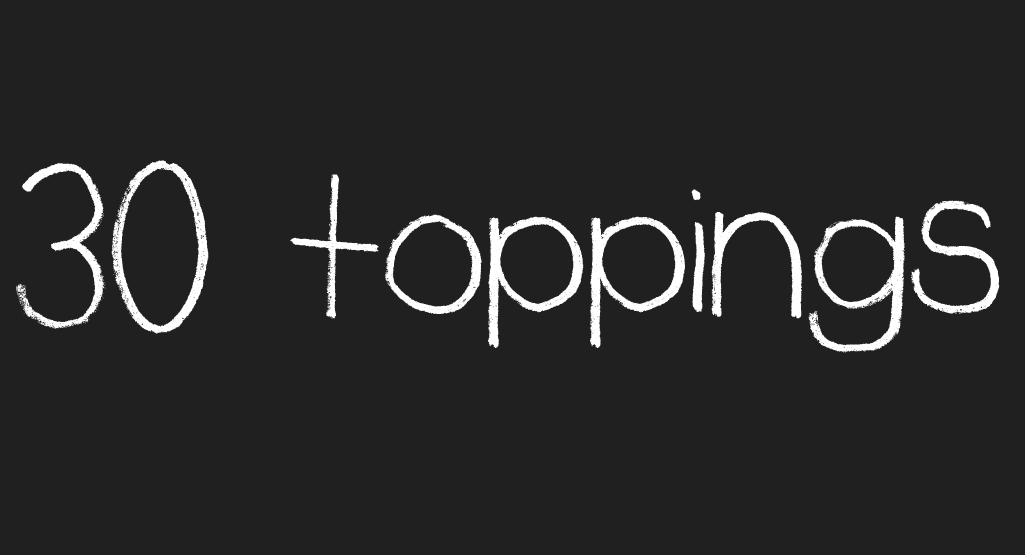
<style>
.page{position:relative;width:1025px;height:555px;background:#202020}
.page>*{position:absolute;margin:0}
.t1{font:233.3px "Rudiment";color:#ffffff}
</style>
<div class="page">
<p class="t1" style="left:16px;top:160px;width:984px;height:193px">30 toppings</p>
</div>
